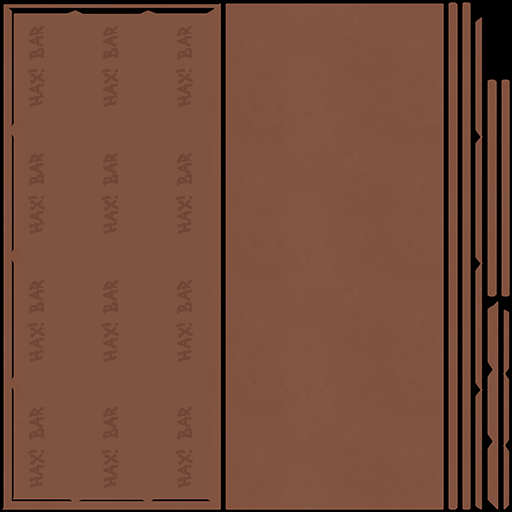
<style>
.page{position:relative;width:512px;height:512px;background:#7f5441}
.page>*{position:absolute;margin:0}
.t1{font:21.8px "HandMeDownS-BRK-";color:#704636;text-transform:uppercase}
</style>
<div class="page">
<p class="t1" style="left:28px;top:26px;width:17px;height:81px;rotate:-90deg">hax! Bar</p>
<p class="t1" style="left:102px;top:26px;width:17px;height:81px;rotate:-90deg">hax! Bar</p>
<p class="t1" style="left:176px;top:26px;width:17px;height:81px;rotate:-90deg">hax! Bar</p>
<p class="t1" style="left:28px;top:153px;width:17px;height:81px;rotate:-90deg">hax! Bar</p>
<p class="t1" style="left:102px;top:153px;width:17px;height:81px;rotate:-90deg">hax! Bar</p>
<p class="t1" style="left:176px;top:153px;width:17px;height:81px;rotate:-90deg">hax! Bar</p>
<p class="t1" style="left:28px;top:280px;width:17px;height:82px;rotate:-90deg">hax! Bar</p>
<p class="t1" style="left:102px;top:280px;width:17px;height:82px;rotate:-90deg">hax! Bar</p>
<p class="t1" style="left:176px;top:280px;width:17px;height:82px;rotate:-90deg">hax! Bar</p>
<p class="t1" style="left:28px;top:407px;width:17px;height:81px;rotate:-90deg">hax! Bar</p>
<p class="t1" style="left:102px;top:407px;width:17px;height:81px;rotate:-90deg">hax! Bar</p>
<p class="t1" style="left:176px;top:407px;width:17px;height:81px;rotate:-90deg">hax! Bar</p>
</div>
